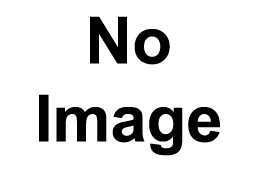
<style>
.page{position:relative;width:258px;height:172px;background:#ffffff}
.page>*{position:absolute;margin:0}
.t1{font:65px "Arial-BoldMT";color:#000000}
</style>
<div class="page">
<p class="t1" style="left:39px;top:16px;width:181px;height:140px;text-align:center">No<br>Image</p>
</div>
